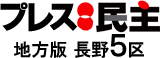
<style>
.page{position:relative;width:160px;height:58px;background:#ffffff}
.page>*{position:absolute;margin:0}
.t1{font:30px "HGSKasaneKakugothicH";letter-spacing:-0.24em;color:#000000}
.t2{font:30px "HGSKasaneKakugothicH";letter-spacing:-0.075em;color:#000000}
.t3{font:18px "HGPGothicE";color:#000000}
.t4{font:28px "HGPGothicE";color:#000000}
</style>
<div class="page">
<p class="t1" style="left:0px;top:2px;width:77px;height:30px"><span class="t2">プ</span>レス</p>
<p class="t3" style="left:14px;top:34px;width:130px;height:24px">地方版 長野<span class="t4">５</span>区</p>
</div>
